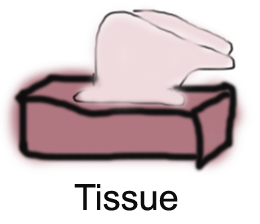
<style>
.page{position:relative;width:260px;height:224px;background:#ffffff}
.page>*{position:absolute;margin:0}
.t1{font:36px "ArialMT";color:#0c0c0c}
</style>
<div class="page">
<p class="t1" style="left:74px;top:184px;width:104px;height:27px">Tissue</p>
</div>
